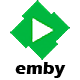
<style>
.page{position:relative;width:80px;height:80px;background:#ffffff}
.page>*{position:absolute;margin:0}
.t1{font:18px "ErasITC-Bold";color:#000000}
</style>
<div class="page">
<p class="t1" style="left:15px;top:62px;width:51px;height:16px">emby</p>
</div>
